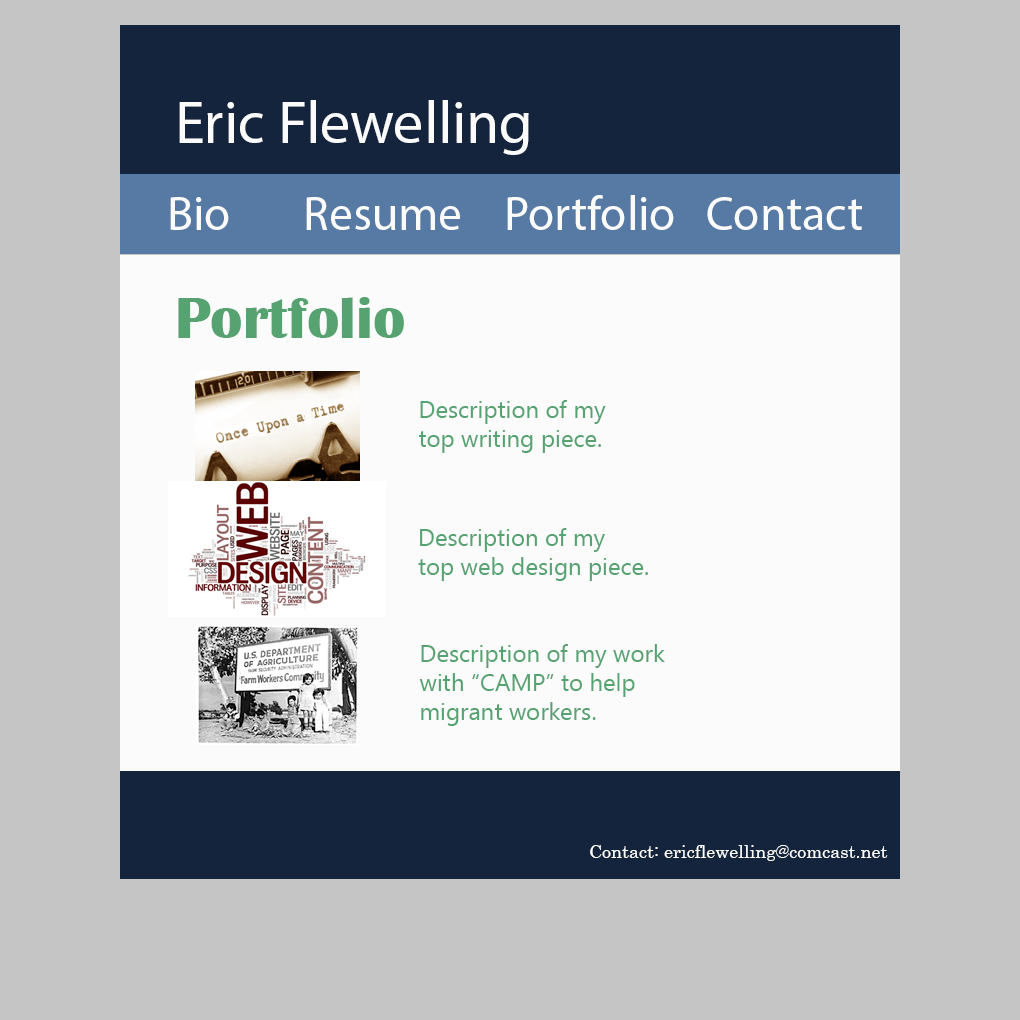
<style>
.page{position:relative;width:1020px;height:1020px;background:#c5c5c5}
.page>*{position:absolute;margin:0}
.t1{font:60px "MyriadPro-Regular";color:#fbfbfb}
.t2{font:48px "MyriadPro-Regular";color:#fbfbfb}
.t3{font:60px "BritannicBold";color:#56a371}
.t4{font:24px "NirmalaUI";color:#56a371}
.t5{font:18px "Century";color:#fffefe}
</style>
<div class="page">
<p class="t1" style="left:179px;top:100px;width:350px;height:55px">Eric Flewelling</p>
<p class="t2" style="left:170px;top:197px;width:59px;height:33px">Bio</p>
<p class="t2" style="left:306px;top:197px;width:154px;height:33px">Resume</p>
<p class="t2" style="left:507px;top:195px;width:167px;height:35px">Portfolio</p>
<p class="t2" style="left:707px;top:197px;width:155px;height:33px">Contact</p>
<p class="t3" style="left:178px;top:297px;width:226px;height:41px">Portfolio</p>
<p class="t4" style="left:418px;top:400px;width:188px;height:53px">Description of my <br>top writing piece.</p>
<p class="t4" style="left:418px;top:528px;width:230px;height:53px">Description of my<br>top web design piece.</p>
<p class="t4" style="left:419px;top:644px;width:246px;height:82px">Description of my work <br>with “CAMP” to help <br>migrant workers.</p>
<p class="t5" style="left:590px;top:845px;width:298px;height:16px">Contact: ericflewelling@comcast.net</p>
</div>
